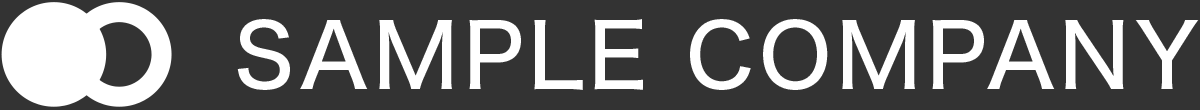
<style>
.page{position:relative;width:1200px;height:110px;background:#333333}
.page>*{position:absolute;margin:0}
.t1{font:88.5px "HiraginoSans-W5";letter-spacing:0.05em;color:#ffffff}
</style>
<div class="page">
<p class="t1" style="left:237px;top:19px;width:962px;height:71px">SAMPLE COMPANY</p>
</div>
